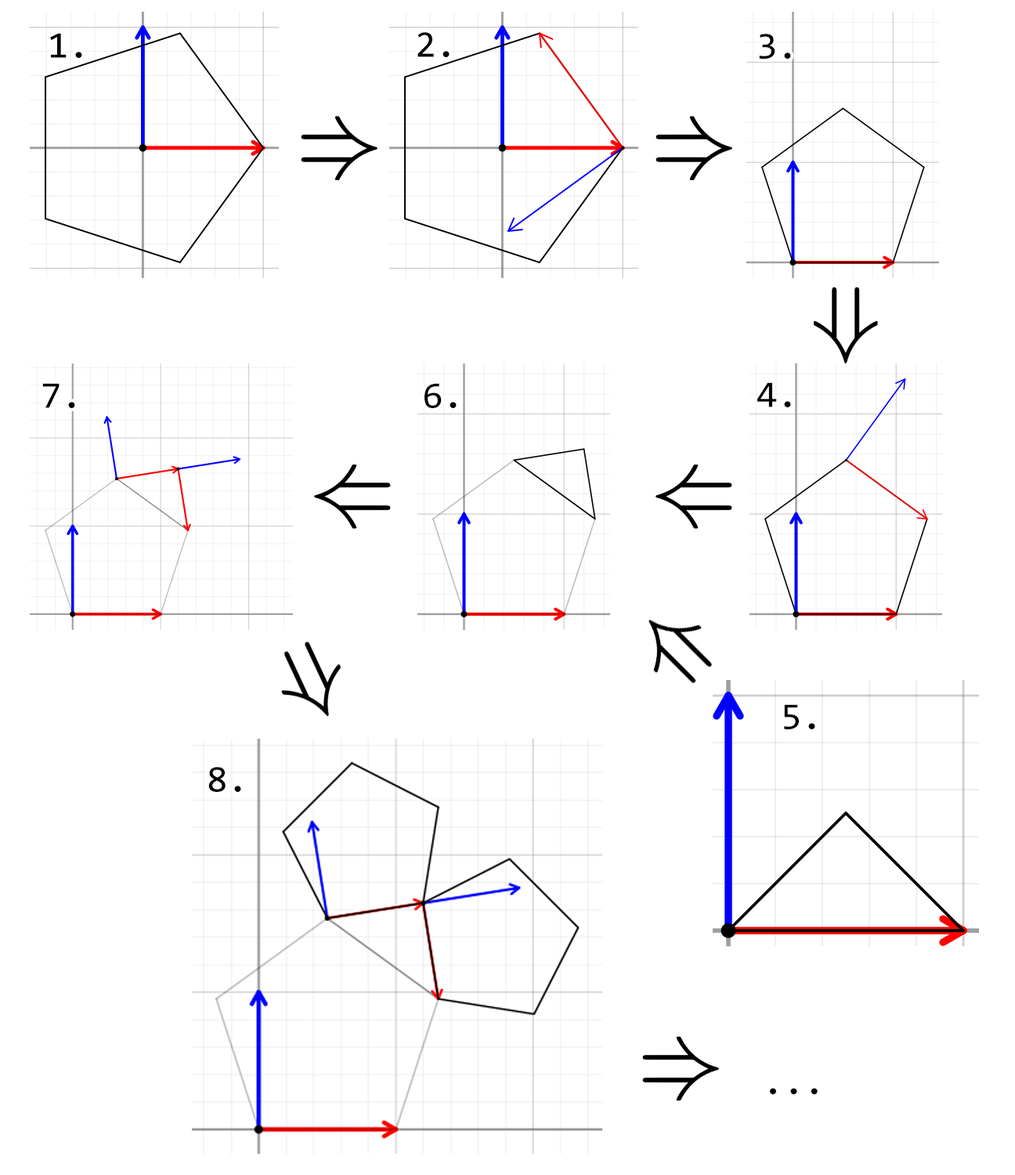
<style>
.page{position:relative;width:1015px;height:1175px;background:#ffffff}
.page>*{position:absolute;margin:0}
.t1{font:37.6px "Consolas";color:#000000}
</style>
<div class="page">
<p class="t1" style="left:50px;top:33px;width:32px;height:25px">1.</p>
<p class="t1" style="left:417px;top:32px;width:33px;height:25px">2.</p>
<p class="t1" style="left:759px;top:34px;width:32px;height:25px">3.</p>
<p class="t1" style="left:42px;top:383px;width:33px;height:25px">7.</p>
<p class="t1" style="left:424px;top:383px;width:33px;height:25px">6.</p>
<p class="t1" style="left:757px;top:382px;width:34px;height:25px">4.</p>
<p class="t1" style="left:784px;top:704px;width:31px;height:25px">5.</p>
<p class="t1" style="left:208px;top:767px;width:33px;height:25px">8.</p>
<p class="t1" style="left:770px;top:1088px;width:48px;height:6px">...</p>
</div>
